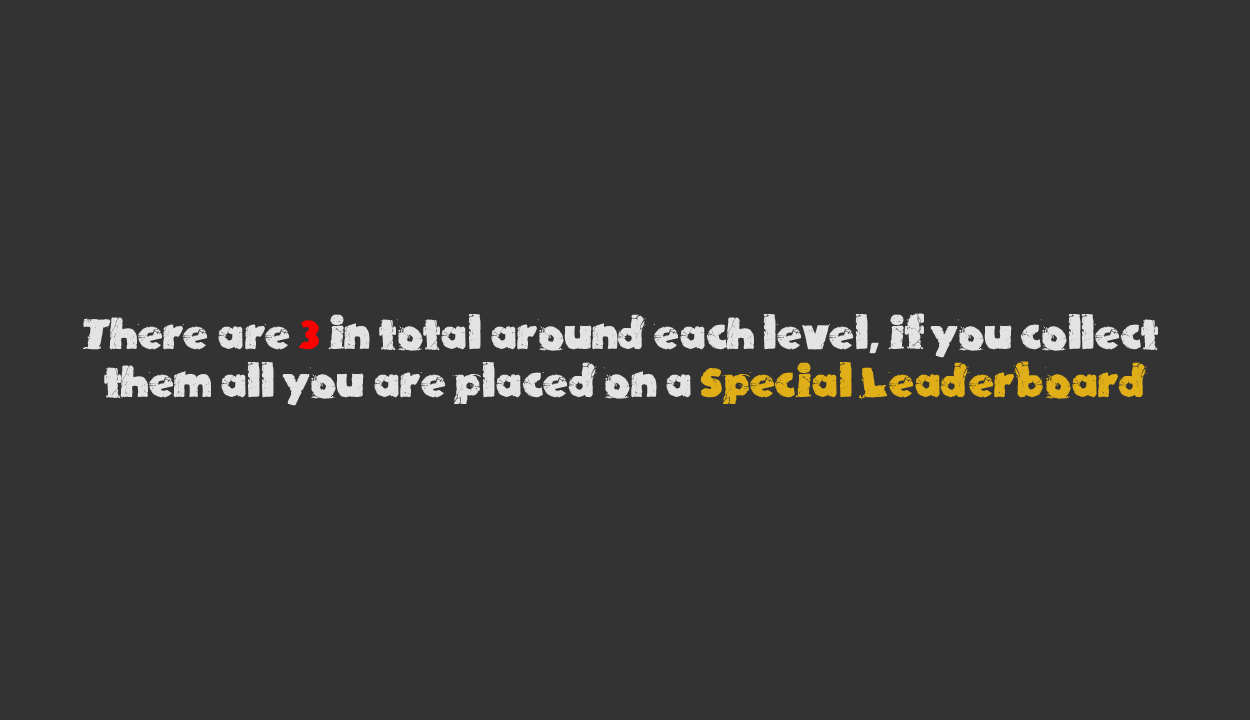
<style>
.page{position:relative;width:1250px;height:720px;background:#333333}
.page>*{position:absolute;margin:0}
.t1{font:40px "TNTXPlosion";color:#e3e3e3}
.t2{font:40px "TNTXPlosion";color:#ff0000}
.t3{font:40px "TNTXPlosion";color:#e0af18}
</style>
<div class="page">
<p class="t1" style="left:82px;top:313px;width:1076px;height:93px;text-align:center">There are <span class="t2">3 </span>in total around each level, if you collect <br>them all you are placed on a <span class="t3">Special Leaderboard</span></p>
</div>
